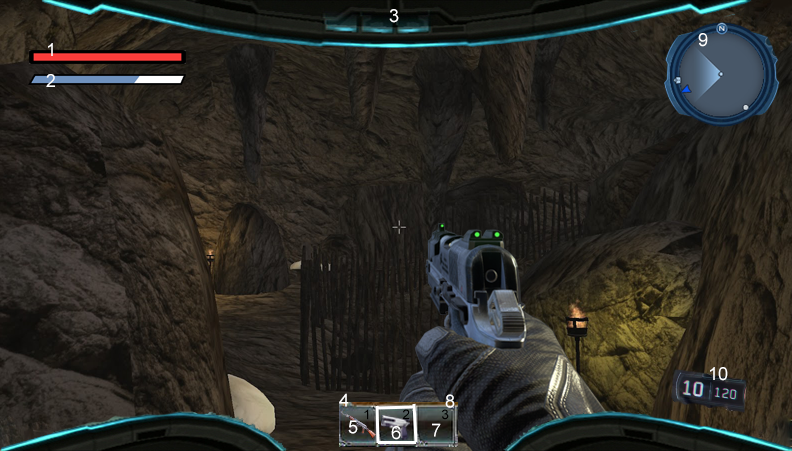
<style>
.page{position:relative;width:792px;height:451px}
.page>*{position:absolute;margin:0}
.t1{font:18px "ArialMT";color:#ffffff}
.t2{font:13.8px "ArialMT";color:#000000}
</style>
<div class="page">
<p class="t1" style="left:389px;top:9px;width:10px;height:14px">3</p>
<p class="t1" style="left:698px;top:33px;width:10px;height:14px">9</p>
<p class="t1" style="left:48px;top:43px;width:5px;height:13px">1</p>
<p class="t1" style="left:46px;top:74px;width:9px;height:13px">2</p>
<p class="t1" style="left:710px;top:367px;width:18px;height:14px">10</p>
<p class="t1" style="left:339px;top:393px;width:10px;height:14px">4</p>
<p class="t1" style="left:445px;top:394px;width:10px;height:14px">8</p>
<p class="t2" style="left:364px;top:409px;width:5px;height:11px">1</p>
<p class="t2" style="left:402px;top:409px;width:8px;height:11px">2</p>
<p class="t2" style="left:442px;top:409px;width:7px;height:11px">3</p>
<p class="t1" style="left:348px;top:420px;width:10px;height:14px">5</p>
<p class="t1" style="left:432px;top:423px;width:9px;height:14px">7</p>
<p class="t1" style="left:391px;top:426px;width:10px;height:14px">6</p>
</div>
